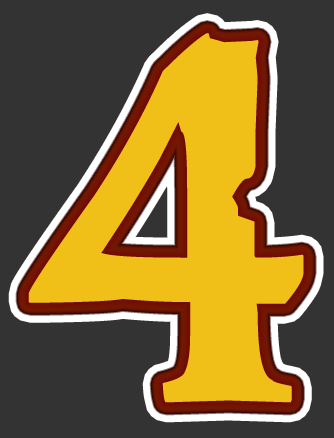
<style>
.page{position:relative;width:334px;height:438px;background:#333333}
.page>*{position:absolute;margin:0}
.t1{font:550px "PiecesofEight";letter-spacing:0.18em;color:#f0c018}
</style>
<div class="page">
<p class="t1" style="left:28px;top:33px;width:276px;height:370px">4</p>
</div>
